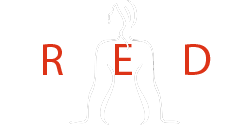
<style>
.page{position:relative;width:250px;height:125px;background:#ffffff}
.page>*{position:absolute;margin:0}
.t1{font:45px "MyriadPro-Regular";color:#dd3317}
.t2{font:48px "MyriadPro-Regular";color:#dd3317}
</style>
<div class="page">
<p class="t1" style="left:43px;top:44px;width:168px;height:31px"><span class="t2">  </span>R     E     D</p>
</div>
